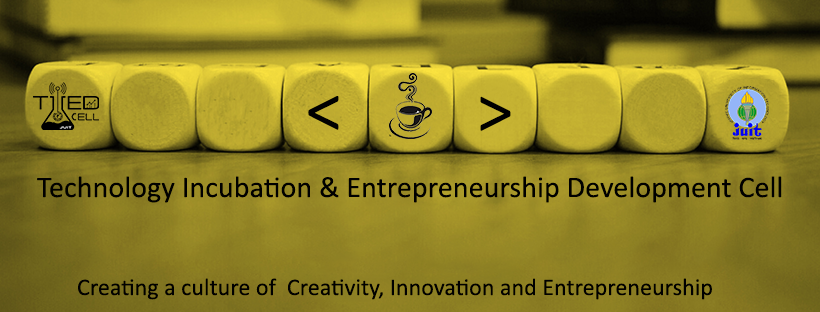
<style>
.page{position:relative;width:820px;height:312px}
.page>*{position:absolute;margin:0}
.t1{font:72px "Calibri";letter-spacing:0.002em;color:#010101}
.t2{font:72px "Calibri";letter-spacing:0.002em;color:#000000}
.t3{font:30px "Calibri";letter-spacing:0.002em;color:#000000}
.t4{font:24px "Calibri";letter-spacing:0.002em;color:#000000}
</style>
<div class="page">
<p class="t1" style="left:308px;top:96px;width:31px;height:34px">&lt;</p>
<p class="t2" style="left:480px;top:96px;width:31px;height:35px">&gt;</p>
<p class="t3" style="left:37px;top:176px;width:745px;height:27px">Technology Incubation &amp; Entrepreneurship Development Cell</p>
<p class="t4" style="left:78px;top:278px;width:634px;height:22px">Creating a culture of  Creativity, Innovation and Entrepreneurship</p>
</div>
